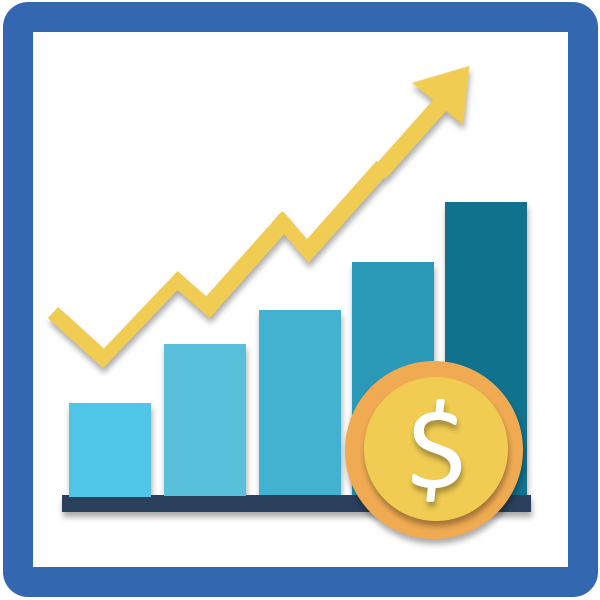
<style>
.page{position:relative;width:600px;height:600px;background:#ffffff}
.page>*{position:absolute;margin:0}
.t1{font:120px "Calibri";color:#ffffff}
</style>
<div class="page">
<p class="t1" style="left:412px;top:399px;width:50px;height:103px">$</p>
</div>
